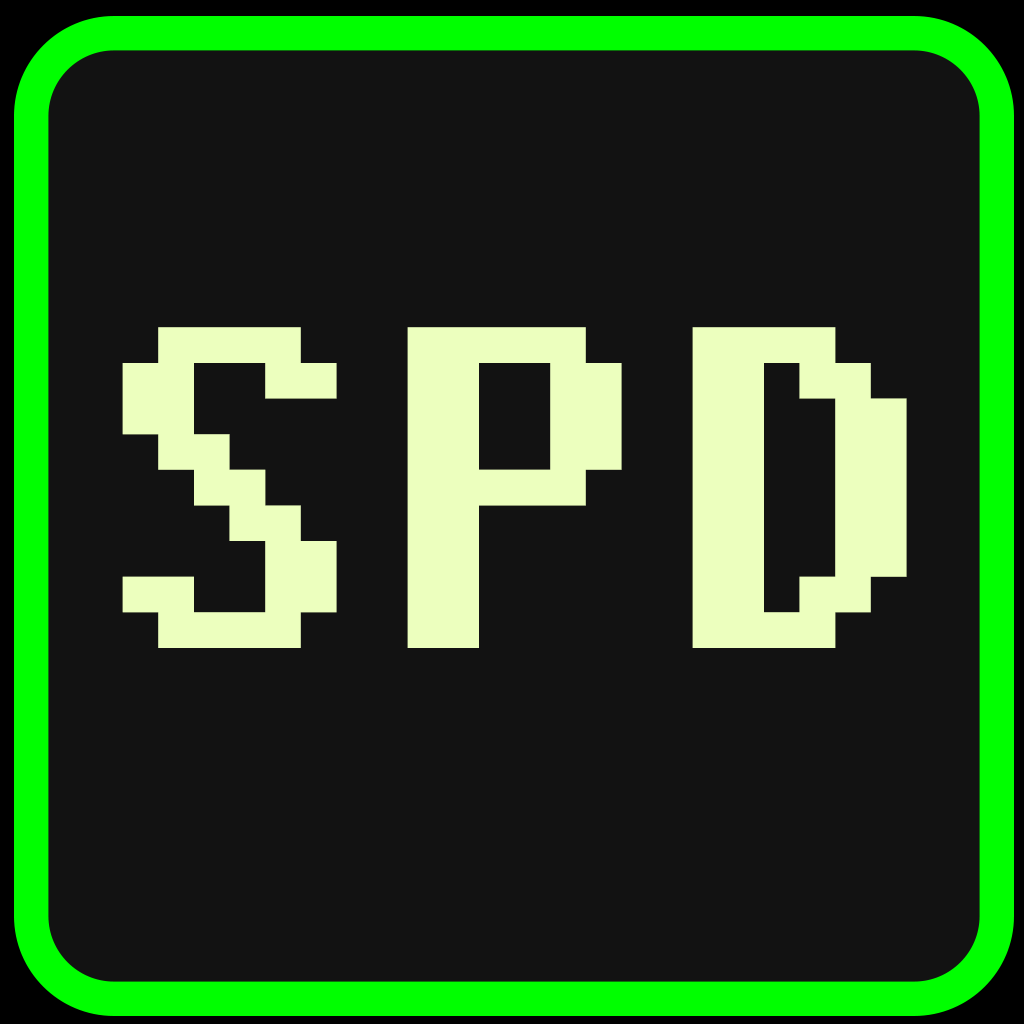
<style>
.page{position:relative;width:1024px;height:1024px;background:#121212}
.page>*{position:absolute;margin:0}
.t1{font:456px "Fixedsys";color:#ecffbe}
</style>
<div class="page">
<p class="t1" style="left:122px;top:327px;width:785px;height:321px">SPD</p>
</div>
